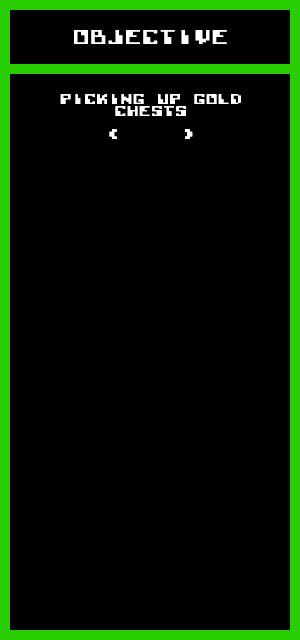
<style>
.page{position:relative;width:300px;height:640px;background:#000000}
.page>*{position:absolute;margin:0}
.t1{font:13.9px "Lode-Runner-(C64)";color:#ffffff}
.t2{font:9.7px "Lode-Runner-(C64)";color:#ffffff}
</style>
<div class="page">
<p class="t1" style="left:74px;top:30px;width:153px;height:14px">OBJECTIVE</p>
<p class="t2" style="left:60px;top:94px;width:181px;height:45px;text-align:center">PICKING UP GOLD<br>CHESTS<br><br>( /   )</p>
</div>
